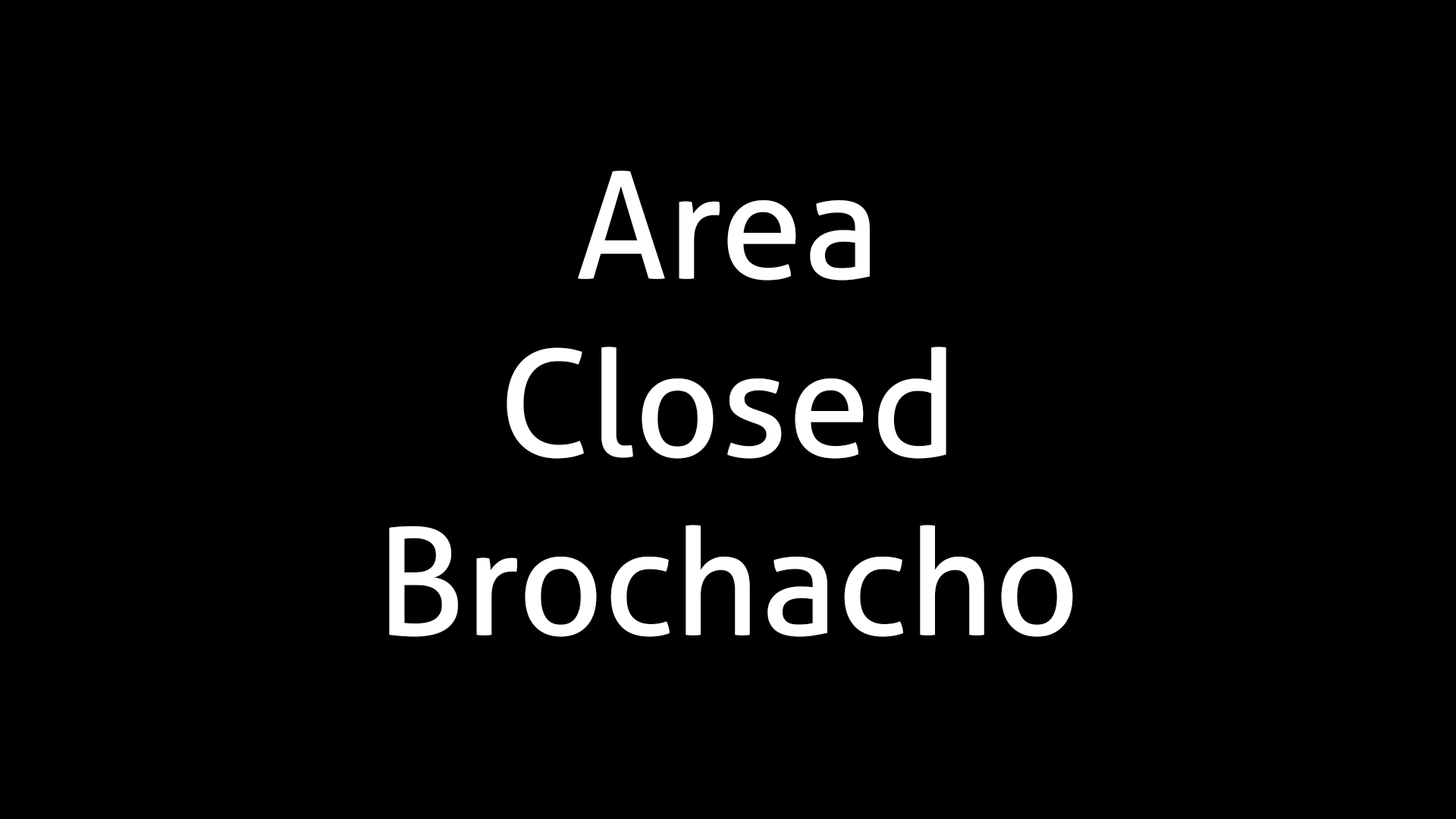
<style>
.page{position:relative;width:1456px;height:819px;background:#000000}
.page>*{position:absolute;margin:0}
.t1{font:148.6px "Aller-Regular";color:#ffffff}
</style>
<div class="page">
<p class="t1" style="left:389px;top:171px;width:684px;height:466px;text-align:center">Area<br>Closed<br>Brochacho</p>
</div>
